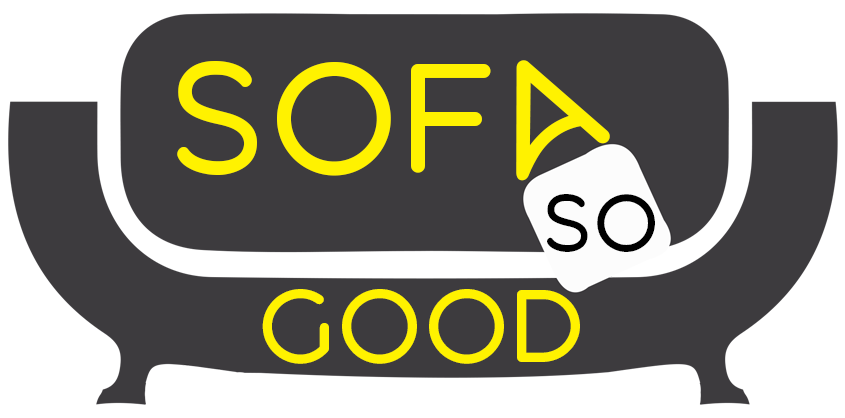
<style>
.page{position:relative;width:845px;height:418px;background:#3d3b3e}
.page>*{position:absolute;margin:0}
.t1{font:139.3px "Aquatico-Regular";letter-spacing:0.07em;color:#fff200}
.t2{font:70.8px "Aquatico-Regular";letter-spacing:0.07em;color:#000000}
.t3{font:91.7px "Aquatico-Regular";letter-spacing:0.07em;color:#fff200}
</style>
<div class="page">
<p class="t1" style="left:177px;top:61px;width:314px;height:115px">Sof</p>
<p class="t1" style="left:516px;top:60px;width:94px;height:121px;rotate:-25deg">a</p>
<p class="t2" style="left:547px;top:194px;width:108px;height:58px">so</p>
<p class="t3" style="left:262px;top:289px;width:318px;height:75px">Good</p>
</div>
